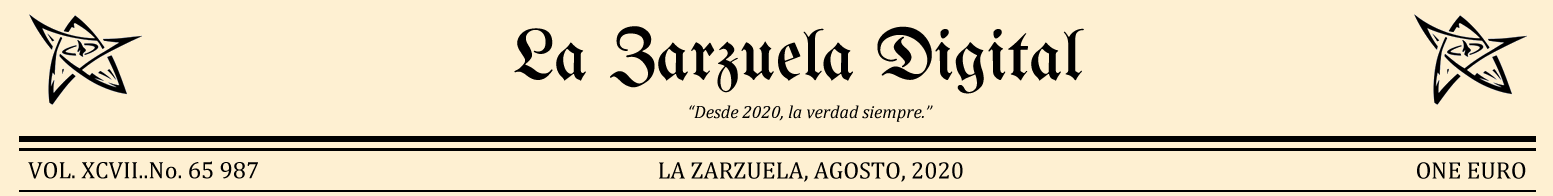
<style>
.page{position:relative;width:1553px;height:196px;background:#fef0d2}
.page>*{position:absolute;margin:0}
.t1{font:72px "UnifrakturMaguntia";color:#000000}
.t2{font:18px "Cambria-Italic";color:#000000}
.t3{font:24px "Cambria";color:#000000}
</style>
<div class="page">
<p class="t1" style="left:514px;top:26px;width:570px;height:68px">La Zarzuela Digital</p>
<p class="t2" style="left:689px;top:105px;width:244px;height:17px">“Desde 2020, la verdad siempre.”</p>
<p class="t3" style="left:28px;top:161px;width:230px;height:18px">VOL. XCVII..No. 65 987</p>
<p class="t3" style="left:659px;top:162px;width:304px;height:20px">LA ZARZUELA, AGOSTO, 2020</p>
<p class="t3" style="left:1417px;top:162px;width:109px;height:17px">ONE EURO</p>
</div>
